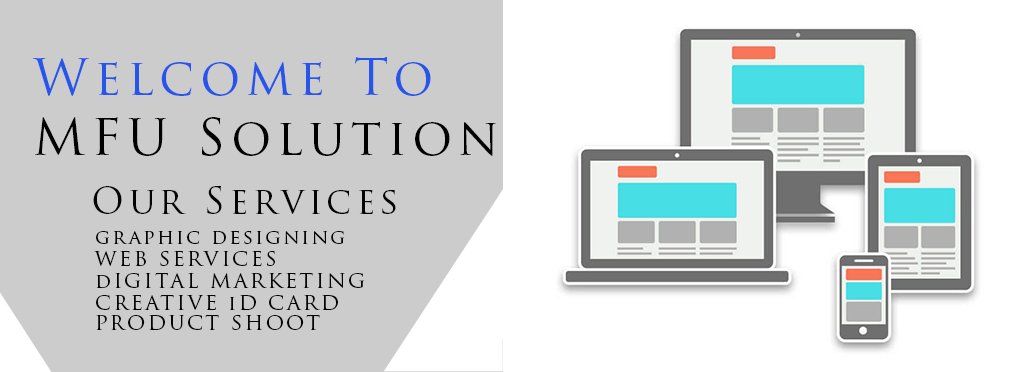
<style>
.page{position:relative;width:1014px;height:372px;background:#cccccc}
.page>*{position:absolute;margin:0}
.t1{font:49.9px "TrajanPro-Regular";letter-spacing:0.12em;color:#000000}
.t2{font:49.9px "TrajanPro-Regular";letter-spacing:0.12em;color:#2755e9}
.t3{font:36px "TrajanPro-Regular";letter-spacing:0.12em;color:#050505}
.t4{font:20px "TrajanPro-Regular";letter-spacing:0.12em;color:#050505}
</style>
<div class="page">
<p class="t1" style="left:32px;top:57px;width:464px;height:99px"><span class="t2">Welcome To <br></span>MFU Solution</p>
<p class="t3" style="left:93px;top:185px;width:303px;height:29px">Our Services</p>
<p class="t4" style="left:96px;top:231px;width:249px;height:14px">graphic designing</p>
<p class="t4" style="left:94px;top:251px;width:181px;height:15px">WEB SERVICES</p>
<p class="t4" style="left:96px;top:272px;width:269px;height:17px">dIGITAL MARKETING</p>
<p class="t4" style="left:96px;top:294px;width:242px;height:17px">CREATIVE iD CARD</p>
<p class="t4" style="left:96px;top:314px;width:224px;height:17px">PRODUCT SHOOT</p>
</div>
